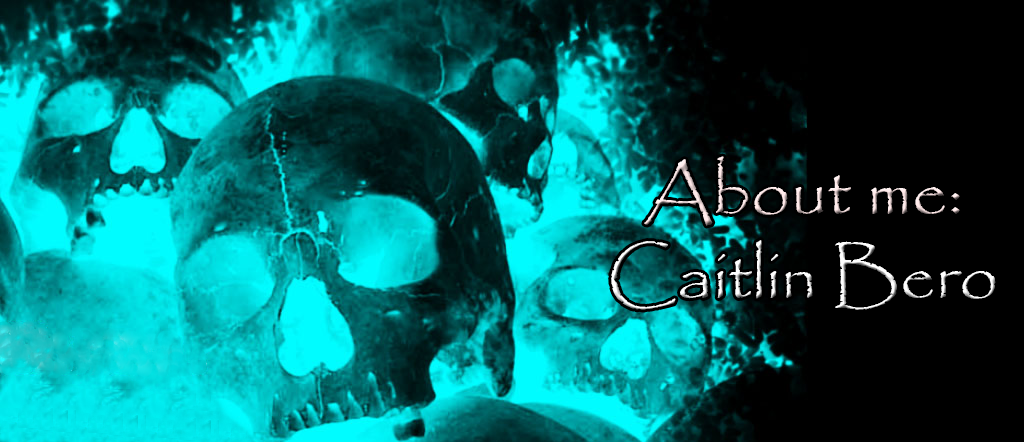
<style>
.page{position:relative;width:1024px;height:442px;background:#000000}
.page>*{position:absolute;margin:0}
.t1{font:70px "Papyrus-Regular"}
</style>
<div class="page">
<p class="t1" style="left:611px;top:156px;width:385px;height:154px;text-align:center">About me: <br>Caitlin Bero</p>
</div>
